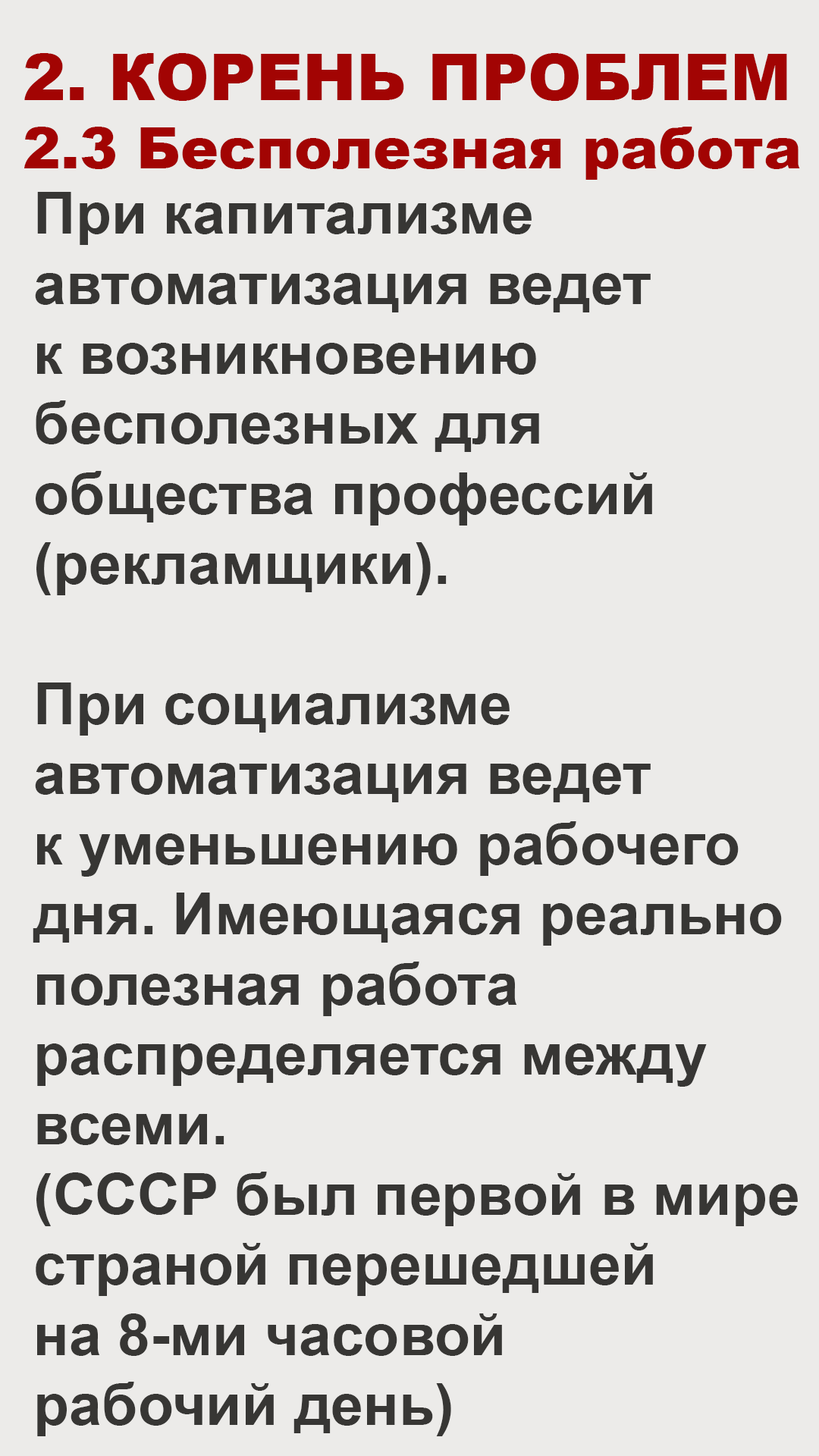
<style>
.page{position:relative;width:819px;height:1456px;background:#ecebe9}
.page>*{position:absolute;margin:0}
.t1{font:56.9px "Arial-Black";color:#a20403}
.t2{font:64.5px "Arial-Black";color:#a20403}
.t3{font:58.4px "Arial-BoldMT";color:#373634}
</style>
<div class="page">
<p class="t1" style="left:24px;top:53px;width:776px;height:127px"><span class="t2">2. КОРЕНЬ ПРОБЛЕМ<br></span>2.3 Бесполезная работа</p>
<p class="t3" style="left:33px;top:192px;width:765px;height:1244px">При капитализме<br>автоматизация ведет<br>к возникновению <br>бесполезных для <br>общества профессий<br>(рекламщики).<br><br>При социализме <br>автоматизация ведет<br>к уменьшению рабочего<br>дня. Имеющаяся реально<br>полезная работа<br>распределяется между<br>всеми.<br>(СССР был первой в мире<br>страной перешедшей <br>на 8-ми часовой <br>рабочий день)</p>
</div>
